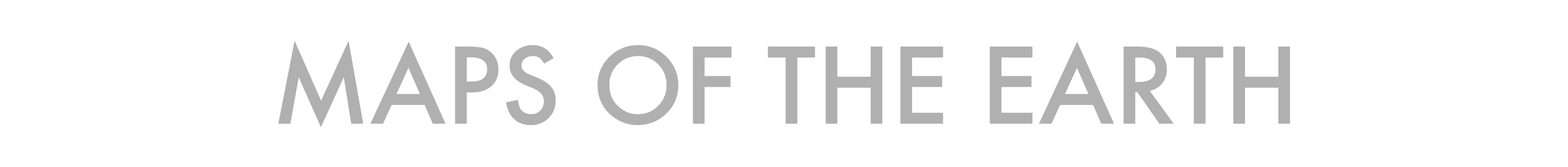
<style>
.page{position:relative;width:1568px;height:167px;background:#ffffff}
.page>*{position:absolute;margin:0}
.t1{font:102.4px "Futura-Medium";letter-spacing:-0.001em;color:#b0b0b0;text-transform:uppercase}
</style>
<div class="page">
<p class="t1" style="left:278px;top:41px;width:1012px;height:87px">Maps of the earth</p>
</div>
